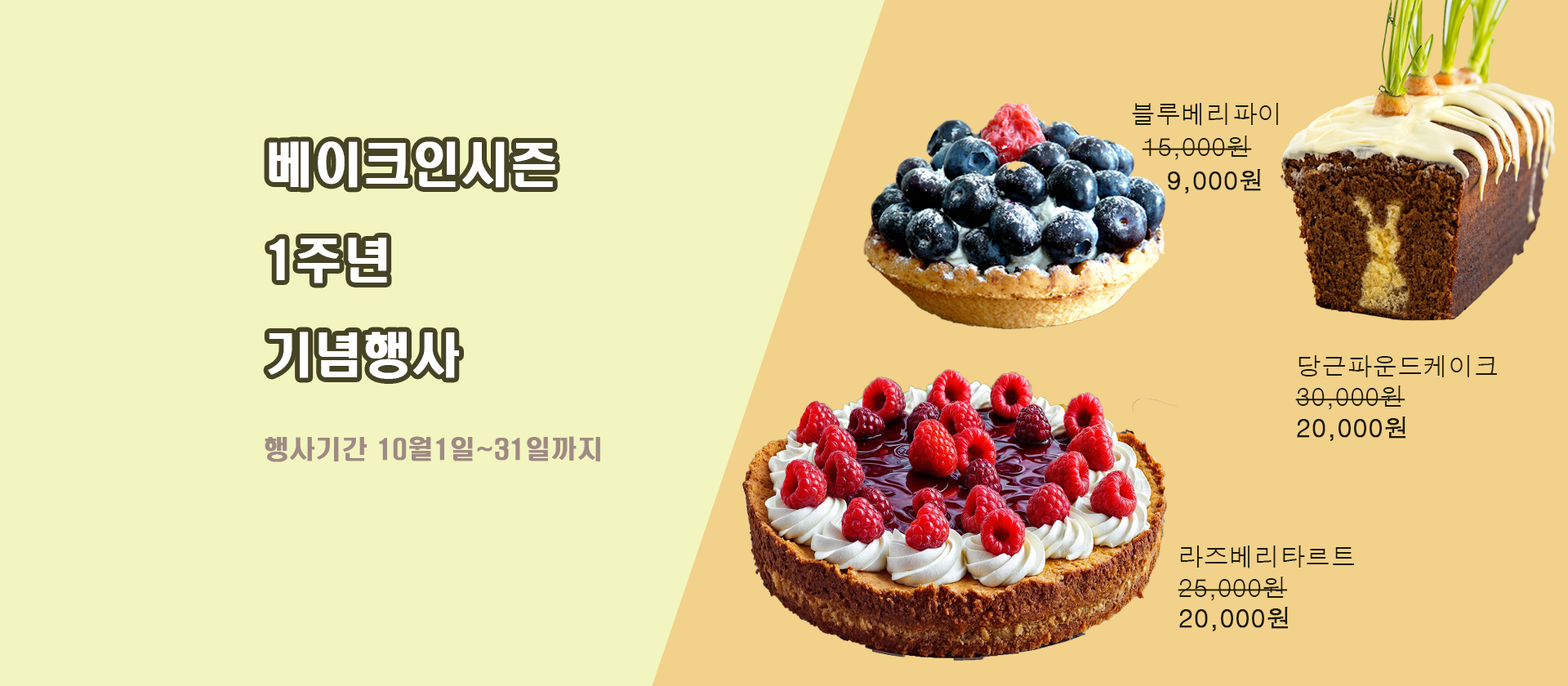
<style>
.page{position:relative;width:1568px;height:686px;background:#f2f5bf}
.page>*{position:absolute;margin:0}
.t1{font:25.4px "Dotum";color:#181902}
.t2{font:25.4px "Dotum";color:#191a02}
.t3{font:47.6px/31.8px "H2hdrM";color:#ffffff;font-weight:bold}
.t4{font:25.4px "Dotum";color:#191a02;font-weight:bold}
.t5{font:25.4px "Dotum";color:#181902;font-weight:bold}
.t6{font:25.4px "H2hdrM";color:#a08a84;font-weight:bold}
</style>
<div class="page">
<p class="t1" style="left:1132px;top:103px;width:147px;height:23px">블루베리파이</p>
<p class="t2" style="left:1142px;top:136px;width:110px;height:24px">15,000원</p>
<p class="t3" style="left:268px;top:141px;width:287px;height:238px">베이크인시즌<br><br><br>1주년<br><br><br>기념행사</p>
<p class="t4" style="left:1168px;top:169px;width:93px;height:25px">9,000원</p>
<p class="t1" style="left:1295px;top:355px;width:202px;height:86px">당근파운드케이크<br>30,000원<br><span class="t5">20,000원</span></p>
<p class="t6" style="left:265px;top:436px;width:335px;height:26px">행사기간 10월1일~31일까지</p>
<p class="t1" style="left:1178px;top:546px;width:176px;height:85px">라즈베리타르트<br>25,000원<br><span class="t5">20,000원</span></p>
</div>
